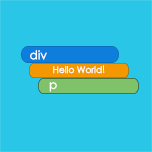
<style>
.page{position:relative;width:152px;height:152px;background:#29c6e7}
.page>*{position:absolute;margin:0}
.t1{font:12.2px "STHeitiSC-Medium";color:#fefdfd}
.t2{font:9.1px "STHeitiSC-Medium";color:#fefdfd}
</style>
<div class="page">
<p class="t1" style="left:30px;top:50px;width:17px;height:10px">div</p>
<p class="t2" style="left:53px;top:65px;width:52px;height:9px">Hello World!</p>
<p class="t1" style="left:49px;top:82px;width:8px;height:10px">p</p>
</div>
